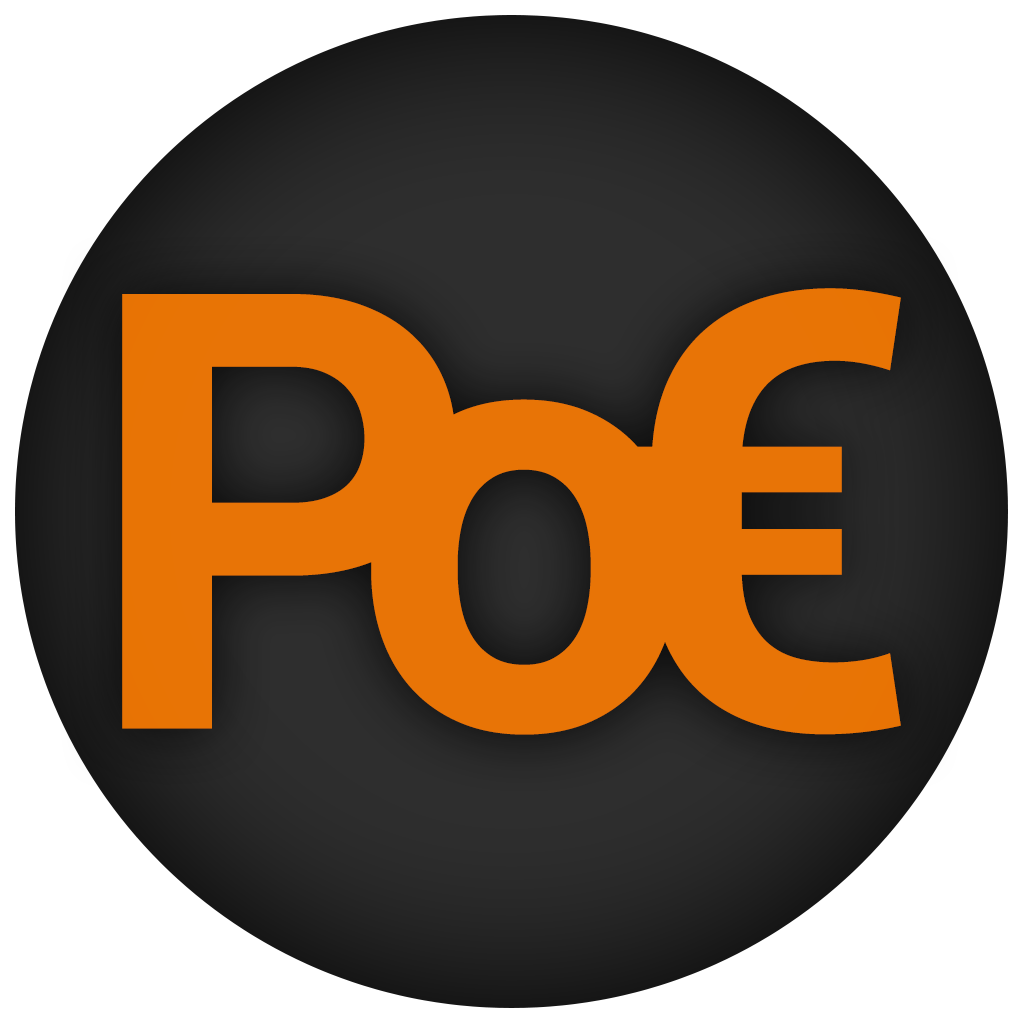
<style>
.page{position:relative;width:1024px;height:1024px;background:#ffffff}
.page>*{position:absolute;margin:0}
.t1{font:611px "Roboto-Bold";letter-spacing:-0.2em;color:#e87406}
</style>
<div class="page">
<p class="t1" style="left:122px;top:288px;width:779px;height:447px">Po€</p>
</div>
